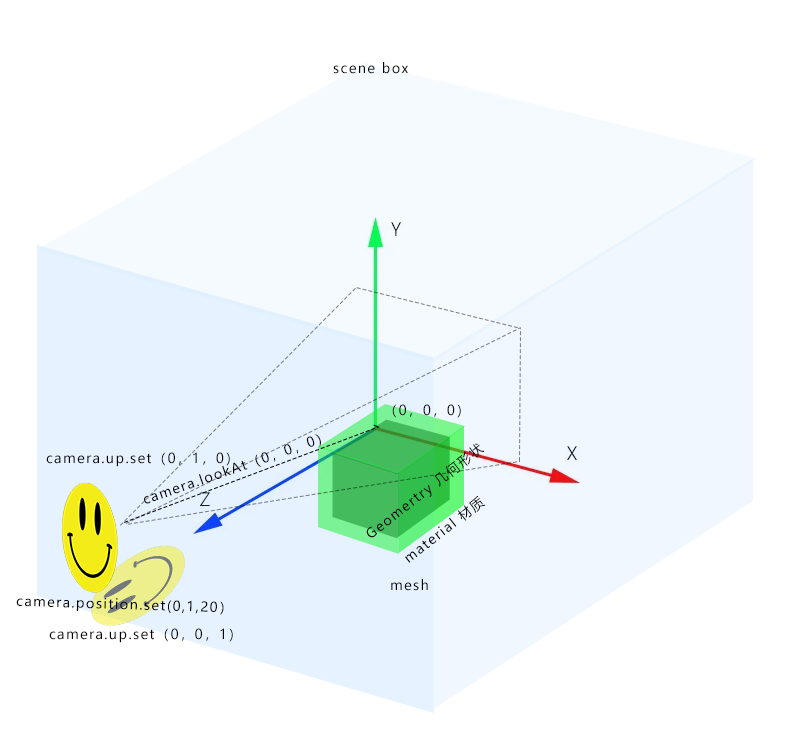
<style>
.page{position:relative;width:800px;height:752px;background:#ffffff}
.page>*{position:absolute;margin:0}
.t1{font:13.5px "MicrosoftYaHei";letter-spacing:0.1em;color:#000000}
</style>
<div class="page">
<p class="t1" style="left:333px;top:62px;width:75px;height:12px">scene box</p>
<p class="t1" style="left:392px;top:404px;width:69px;height:14px">（0，0，0）</p>
<p class="t1" style="left:144px;top:434px;width:177px;height:70px;rotate:-19deg">camera.lookAt（0，0，0）</p>
<p class="t1" style="left:366px;top:443px;width:119px;height:95px;rotate:-38deg">Geomertry 几何形状</p>
<p class="t1" style="left:46px;top:452px;width:184px;height:15px">camera.up.set（0，1，0）</p>
<p class="t1" style="left:405px;top:495px;width:81px;height:68px;rotate:-38deg">material 材质</p>
<p class="t1" style="left:391px;top:579px;width:37px;height:12px">mesh</p>
<p class="t1" style="left:16px;top:598px;width:208px;height:17px;rotate:2deg">camera.position.set(0,1,20）</p>
<p class="t1" style="left:49px;top:628px;width:184px;height:15px">camera.up.set（0，0，1）</p>
</div>
